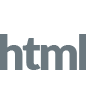
<style>
.page{position:relative;width:86px;height:86px;background:#ffffff}
.page>*{position:absolute;margin:0}
.t1{font:48px "Lato-Black";letter-spacing:-0.065em;color:#6b787f}
</style>
<div class="page">
<p class="t1" style="left:0px;top:34px;width:87px;height:36px">html</p>
</div>
